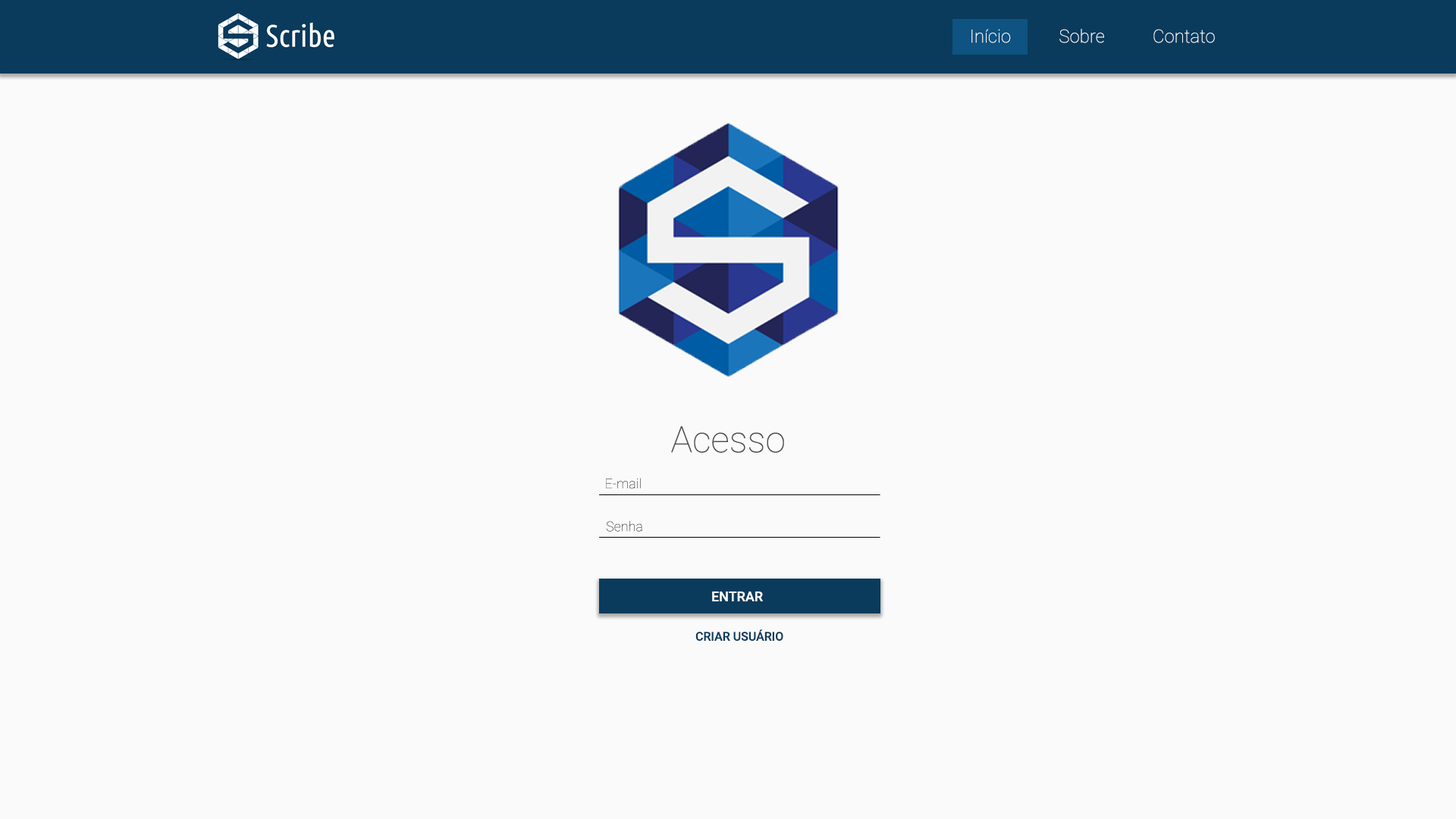
<style>
.page{position:relative;width:1456px;height:819px;background:#fafafa}
.page>*{position:absolute;margin:0}
.t1{font:18.2px "Roboto-Thin";color:#ffffff}
.t2{font:36.4px "Roboto-Thin";color:#4d4d4d}
.t3{font:13.6px "Roboto-Thin";color:#4d4d4d}
.t4{font:13.6px "Roboto-Medium";color:#ffffff}
.t5{font:12.1px "Roboto-Medium";color:#0a3b5c}
</style>
<div class="page">
<p class="t1" style="left:971px;top:29px;width:244px;height:14px">Início           Sobre           Contato</p>
<p class="t2" style="left:671px;top:426px;width:113px;height:27px">Acesso</p>
<p class="t3" style="left:606px;top:478px;width:35px;height:11px">E-mail</p>
<p class="t3" style="left:606px;top:521px;width:36px;height:11px">Senha</p>
<p class="t4" style="left:712px;top:591px;width:51px;height:10px">ENTRAR</p>
<p class="t5" style="left:695px;top:629px;width:88px;height:12px">CRIAR USUÁRIO</p>
</div>
